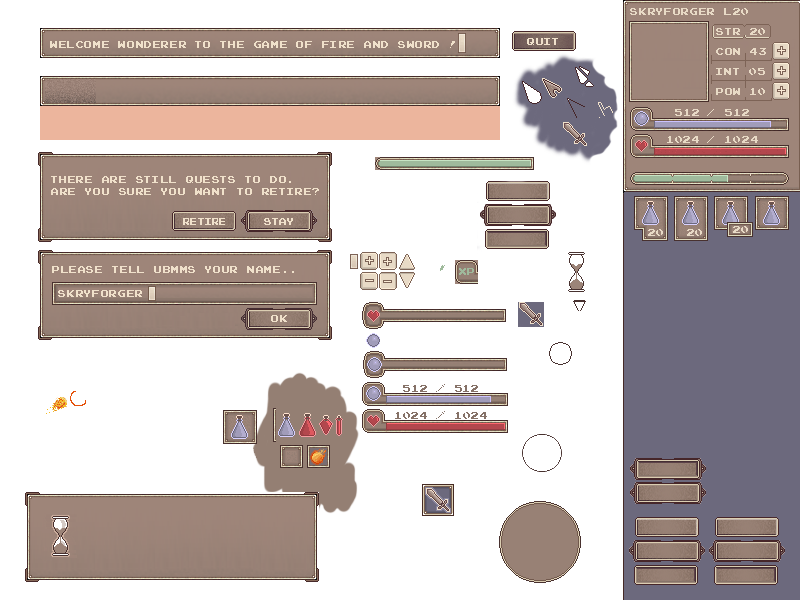
<style>
.page{position:relative;width:800px;height:600px;background:#ffffff}
.page>*{position:absolute;margin:0}
.t1{font:10px "JoystixMonospace-Regular";color:#e8dac6}
.t2{font:10px/20px "JoystixMonospace-Regular";color:#e8dac6}
.t3{font:10px "JoystixMonospace-Regular";color:#f0e1cb}
.t4{font:9px "JoystixMonospace-Regular";color:#f0e1cb}
.t5{font:10px "JoystixMonospace-Regular";letter-spacing:-0.12em;color:#9fba9c}
.t6{font:10px "JoystixMonospace-Regular";color:#857167}
</style>
<div class="page">
<p class="t1" style="left:630px;top:8px;width:118px;height:7px">Skryforger l20</p>
<p class="t2" style="left:716px;top:28px;width:50px;height:67px">STR 20<br>CON 43<br>INT 05<br>POW 10</p>
<p class="t3" style="left:50px;top:41px;width:405px;height:7px">Welcome wonderer to the game of fire and sword !</p>
<p class="t3" style="left:527px;top:38px;width:31px;height:7px">Quit</p>
<p class="t1" style="left:675px;top:109px;width:74px;height:7px">512   512</p>
<p class="t1" style="left:667px;top:136px;width:91px;height:7px">1024   1024</p>
<p class="t3" style="left:51px;top:176px;width:268px;height:19px">There are still quests to do.<br>Are you sure you want to retire?</p>
<p class="t4" style="left:183px;top:218px;width:42px;height:7px">Retire</p>
<p class="t4" style="left:264px;top:218px;width:29px;height:7px">Stay</p>
<p class="t3" style="left:52px;top:266px;width:242px;height:7px">Please tell ubmms your name..</p>
<p class="t5" style="left:459px;top:268px;width:15px;height:7px">Xp</p>
<p class="t3" style="left:58px;top:290px;width:84px;height:7px">Skryforger</p>
<p class="t3" style="left:271px;top:315px;width:16px;height:7px">Ok</p>
<p class="t6" style="left:403px;top:384px;width:75px;height:8px">512 / 512</p>
<p class="t6" style="left:395px;top:411px;width:92px;height:8px">1024 / 1024</p>
</div>
